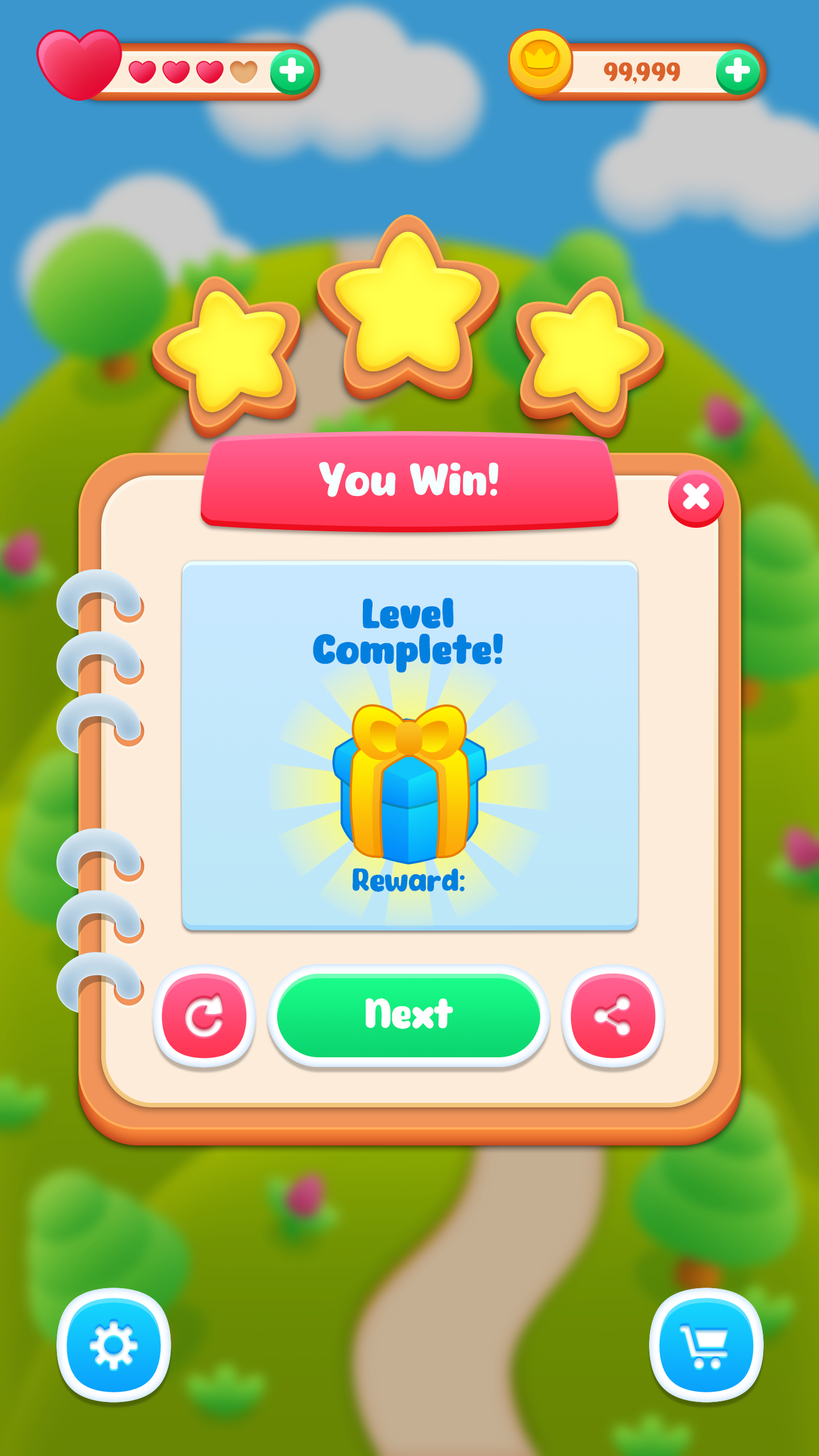
<style>
.page{position:relative;width:819px;height:1456px}
.page>*{position:absolute;margin:0}
.t1{font:43.8px "Eazy-Chat";color:#f5ffff}
.t2{font:39.4px/35.8px "Eazy-Chat";color:#0280e0;font-weight:bold}
.t3{font:30.7px "Eazy-Chat";color:#0280e0}
.t4{font:41px "Eazy-Chat";color:#fffeff}
</style>
<div class="page">
<p class="t1" style="left:319px;top:462px;width:179px;height:35px">You Win!</p>
<p class="t2" style="left:313px;top:598px;width:190px;height:75px;text-align:center">Level<br>Complete!</p>
<p class="t3" style="left:353px;top:868px;width:112px;height:24px">Reward:</p>
<p class="t4" style="left:366px;top:998px;width:87px;height:31px">Next</p>
</div>
